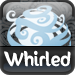
<style>
.page{position:relative;width:75px;height:75px}
.page>*{position:absolute;margin:0}
.t1{font:16.2px "SunnySide";color:#ffffff}
</style>
<div class="page">
<p class="t1" style="left:4px;top:50px;width:67px;height:17px">Whirled</p>
</div>
